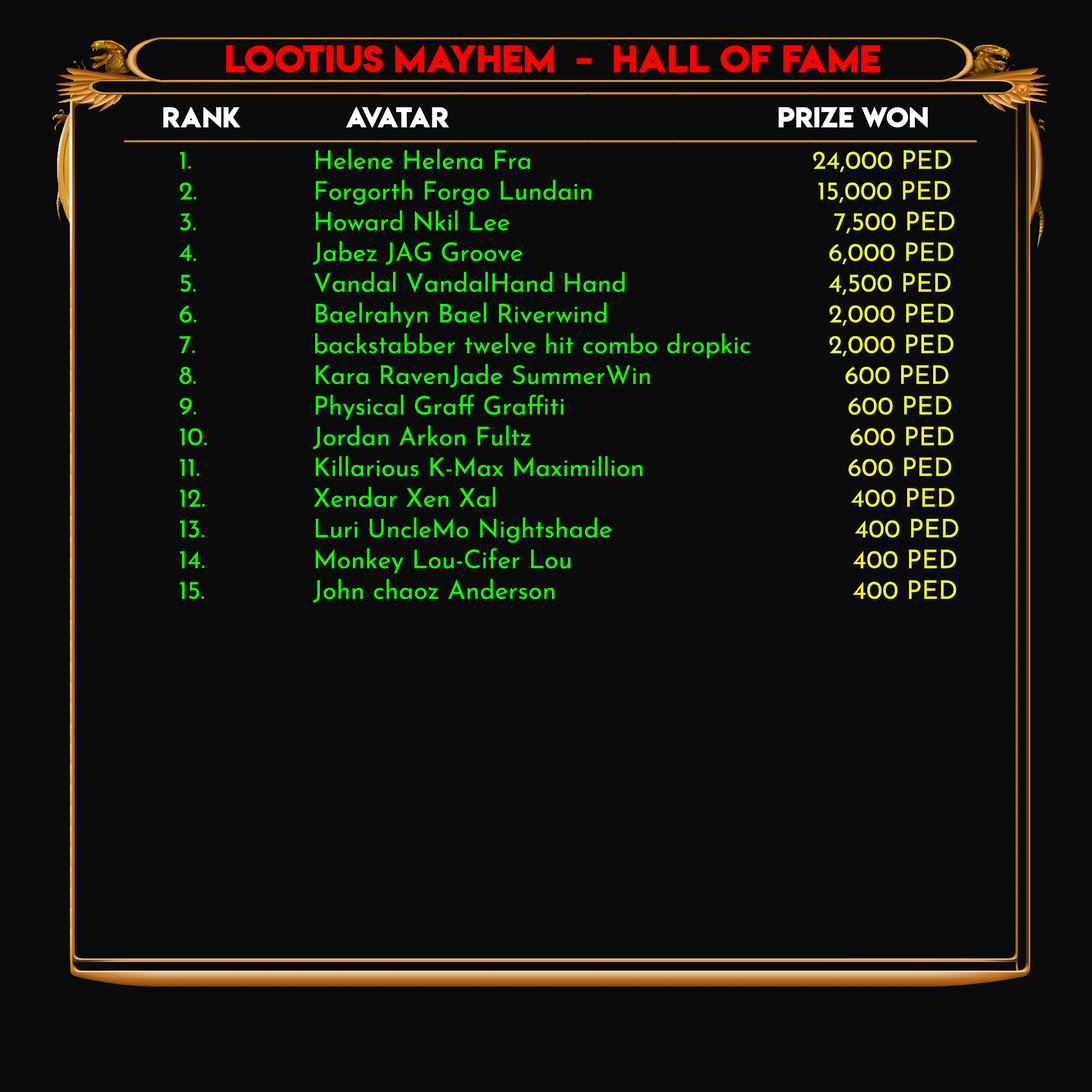
<style>
.page{position:relative;width:1092px;height:1092px;background:#0b0b0b}
.page>*{position:absolute;margin:0}
.t1{font:25.6px "JosefinSans-Regular";color:#15fb04}
.t2{font:25.6px "JosefinSans-Regular";color:#edf835}
</style>
<div class="page">
<p class="t1" style="left:179px;top:149px;width:780px;height:454px">1.       Helene Helena Fra               <span class="t2">24,000 PED<br></span>2.       Forgorth Forgo Lundain​               <span class="t2">15,000 PED<br></span>3.       Howard Nkil Lee​                   <span class="t2">7,500 PED<br></span>4.       Jabez JAG Groove​                 <span class="t2">6,000 PED<br></span>5.       Vandal VandalHand Hand​           <span class="t2">4,500 PED<br></span>6.       Baelrahyn Bael Riverwind             <span class="t2">2,000 PED<br></span>7.       backstabber twelve hit combo dropkic​     <span class="t2">2,000 PED<br></span>8.       Kara RavenJade SummerWin             <span class="t2">600 PED<br></span>9.       Physical Graff Graffiti​               <span class="t2">600 PED<br></span>10.       Jordan Arkon Fultz                     <span class="t2">600 PED<br></span>11.       Killarious K-Max Maximillion​            <span class="t2">600 PED<br></span>12.       Xendar Xen Xal​                                    <span class="t2">400 PED<br></span>13.       Luri UncleMo Nightshade                    <span class="t2">400 PED<br></span>14.       Monkey Lou-Cifer Lou​                       <span class="t2">400 PED<br></span>15.       John chaoz Anderson​                         <span class="t2">400 PED</span></p>
</div>
